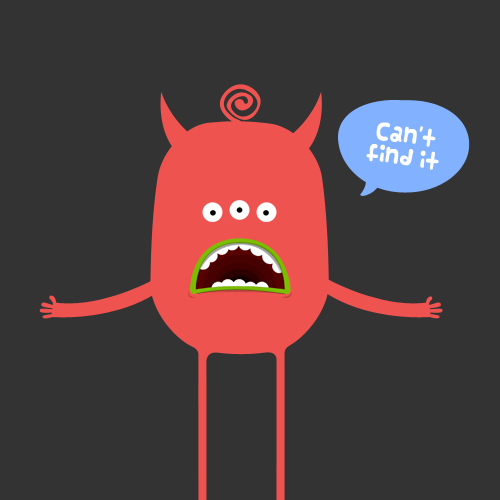
<style>
.page{position:relative;width:500px;height:500px;background:#333333}
.page>*{position:absolute;margin:0}
.t1{font:18.5px "Vanilla";color:#ffffff}
</style>
<div class="page">
<p class="t1" style="left:366px;top:122px;width:73px;height:48px;text-align:center;rotate:8deg">Can't<br>find it</p>
</div>
